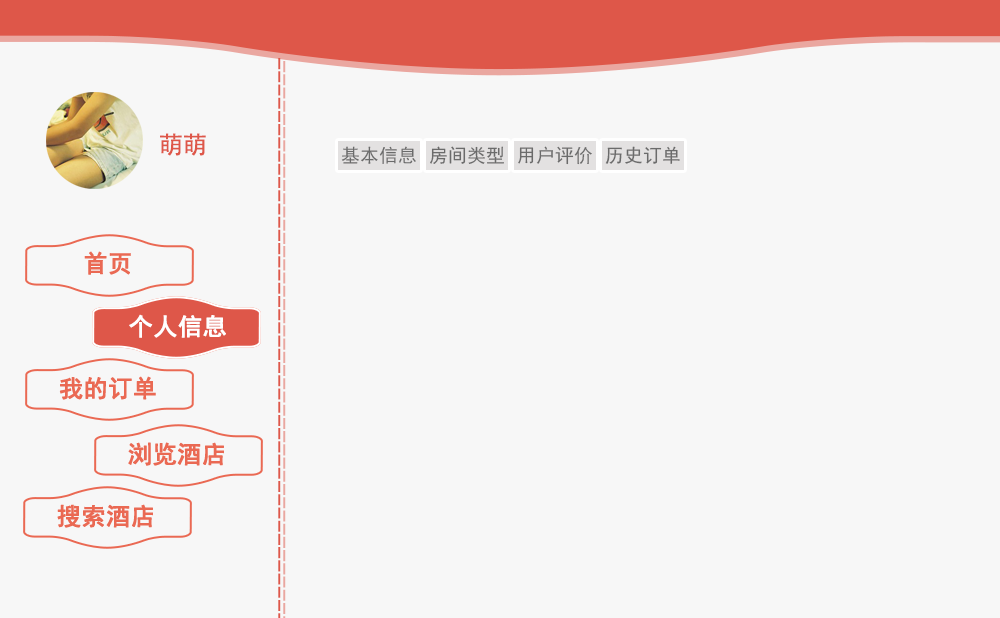
<style>
.page{position:relative;width:1000px;height:618px;background:#f7f7f7}
.page>*{position:absolute;margin:0}
.t1{font:24px "SimHei";color:#de5749}
.t2{font:18.7px "SimHei";color:#6b6b6b}
.t3{font:24px "SimHei";color:#ea6953;font-weight:bold}
.t4{font:24px "SimHei";color:#ffffff;font-weight:bold}
</style>
<div class="page">
<p class="t1" style="left:160px;top:133px;width:46px;height:23px">萌萌</p>
<p class="t2" style="left:341px;top:146px;width:75px;height:18px">基本信息</p>
<p class="t2" style="left:430px;top:146px;width:74px;height:18px">房间类型</p>
<p class="t2" style="left:518px;top:146px;width:74px;height:19px">用户评价</p>
<p class="t2" style="left:605px;top:146px;width:75px;height:18px">历史订单</p>
<p class="t3" style="left:84px;top:251px;width:47px;height:24px">首页</p>
<p class="t4" style="left:129px;top:314px;width:97px;height:24px">个人信息</p>
<p class="t3" style="left:59px;top:376px;width:97px;height:24px">我的订单</p>
<p class="t3" style="left:128px;top:442px;width:96px;height:24px">浏览酒店</p>
<p class="t3" style="left:57px;top:504px;width:96px;height:24px">搜索酒店</p>
</div>
